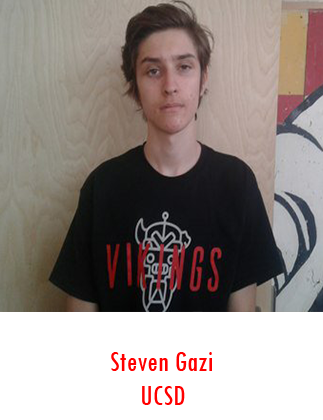
<style>
.page{position:relative;width:323px;height:420px;background:#ffffff}
.page>*{position:absolute;margin:0}
.t1{font:30px "TwCenMT-Condensed";color:#ff0000}
</style>
<div class="page">
<p class="t1" style="left:111px;top:352px;width:101px;height:19px">Steven Gazi</p>
<p class="t1" style="left:142px;top:386px;width:43px;height:19px">UCSD</p>
</div>
